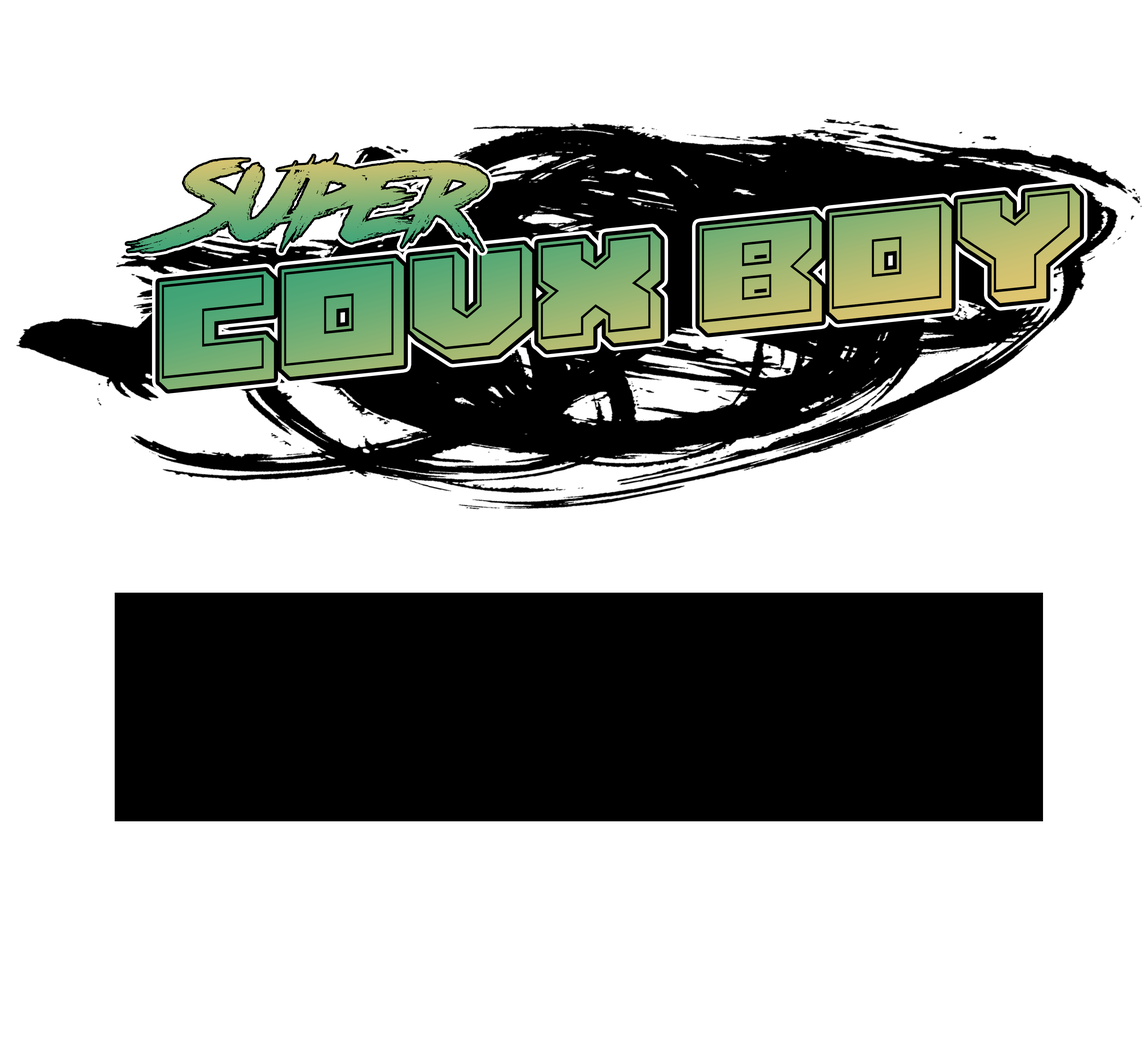
<style>
.page{position:relative;width:1142px;height:1044px;background:#ffffff}
.page>*{position:absolute;margin:0}
.t1{font:158.2px "Ausweis-Regular";scale:1.03 1}
</style>
<div class="page">
<p class="t1" style="left:159px;top:188px;width:921px;height:202px;rotate:-6deg">CovX Boy</p>
</div>
